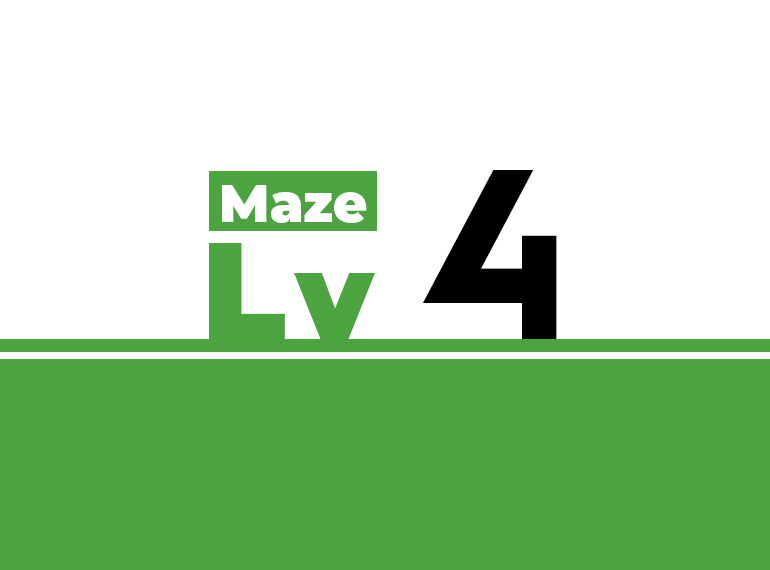
<style>
.page{position:relative;width:770px;height:570px;background:#ffffff}
.page>*{position:absolute;margin:0}
.t1{font:326.2px "Momcake-Bold";letter-spacing:0.1em;color:#000000}
.t2{font:52.6px "Montserrat-Black";color:#ffffff}
.t3{font:137.4px "Montserrat-Black";letter-spacing:0.075em;color:#4ba43f}
.t4{font:120px "Montserrat-Black";letter-spacing:0.075em;color:#4ba43f}
</style>
<div class="page">
<p class="t1" style="left:422px;top:170px;width:135px;height:169px">4</p>
<p class="t2" style="left:222px;top:185px;width:145px;height:38px">Maze</p>
<p class="t3" style="left:209px;top:243px;width:166px;height:97px">L<span class="t4">v</span></p>
</div>
